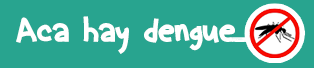
<style>
.page{position:relative;width:314px;height:68px;background:#28a48f}
.page>*{position:absolute;margin:0}
.t1{font:36px "Animated";letter-spacing:0.005em;color:#ffffff}
</style>
<div class="page">
<p class="t1" style="left:16px;top:16px;width:219px;height:38px">Aca hay dengue</p>
</div>
